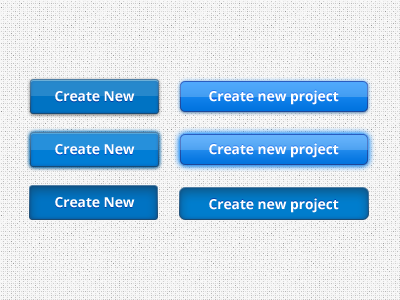
<style>
.page{position:relative;width:400px;height:300px}
.page>*{position:absolute;margin:0}
.t1{font:13.7px "OpenSans-Bold";color:#ffffff}
</style>
<div class="page">
<p class="t1" style="left:55px;top:91px;width:80px;height:11px">Create New</p>
<p class="t1" style="left:209px;top:90px;width:130px;height:15px">Create new project</p>
<p class="t1" style="left:55px;top:144px;width:80px;height:11px">Create New</p>
<p class="t1" style="left:209px;top:143px;width:130px;height:15px">Create new project</p>
<p class="t1" style="left:55px;top:197px;width:80px;height:11px">Create New</p>
<p class="t1" style="left:209px;top:198px;width:130px;height:15px">Create new project</p>
</div>
